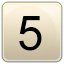
<style>
.page{position:relative;width:64px;height:64px}
.page>*{position:absolute;margin:0}
.t1{font:48px "ArialMT";color:#000000}
</style>
<div class="page">
<p class="t1" style="left:19px;top:16px;width:23px;height:35px">5</p>
</div>
